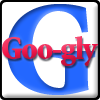
<style>
.page{position:relative;width:100px;height:100px;background:#ffffff}
.page>*{position:absolute;margin:0}
.t1{font:133.4px "MinionStd-Black"}
.t2{font:33.4px "MinionStd-Black";letter-spacing:-0.04em;scale:0.95 1}
</style>
<div class="page">
<p class="t1" style="left:7px;top:4px;width:89px;height:91px">G</p>
<p class="t2" style="left:2px;top:36px;width:96px;height:30px">Goo-gly</p>
</div>
